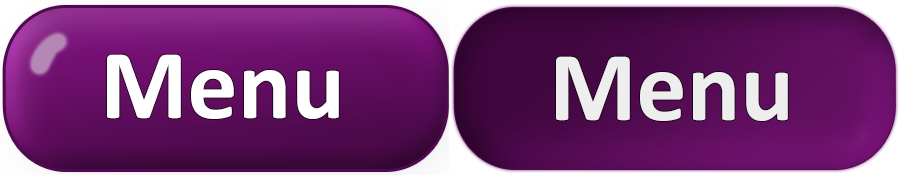
<style>
.page{position:relative;width:900px;height:176px}
.page>*{position:absolute;margin:0}
.t1{font:100px "Calibri-Bold";color:#ffffff}
.t2{font:100px "Calibri-Bold";color:#eeeeee}
</style>
<div class="page">
<p class="t1" style="left:107px;top:54px;width:232px;height:65px">Menu</p>
<p class="t2" style="left:556px;top:56px;width:232px;height:65px">Menu</p>
</div>
